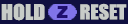
<style>
.page{position:relative;width:128px;height:24px;background:#101040}
.page>*{position:absolute;margin:0}
.t1{font:19.9px "Impact";color:#c8ccc8;scale:1.09 1}
.t2{font:19px "Impact";color:#c8ccc8;scale:1.06 1}
</style>
<div class="page">
<p class="t1" style="left:1px;top:3px;width:44px;height:18px">HOLD</p>
<p class="t2" style="left:80px;top:3px;width:47px;height:17px">RESET</p>
</div>
